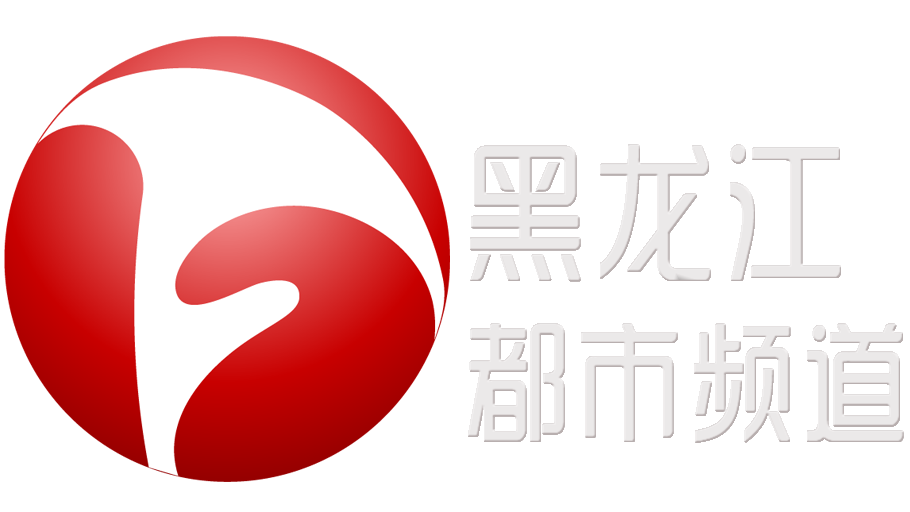
<style>
.page{position:relative;width:910px;height:512px;background:#ffffff}
.page>*{position:absolute;margin:0}
.t1{font:130px/180px "SJyunlvyuan";letter-spacing:0.02em;color:#ebe9e9;scale:0.85 1}
.t2{font:150px/180px "SJyunlvyuan";letter-spacing:0.02em;color:#ebe9e9;scale:0.85 1}
</style>
<div class="page">
<p class="t1" style="left:468px;top:144px;width:436px;height:299px"><span class="t2">黑龙江<br></span>都市频道</p>
</div>
